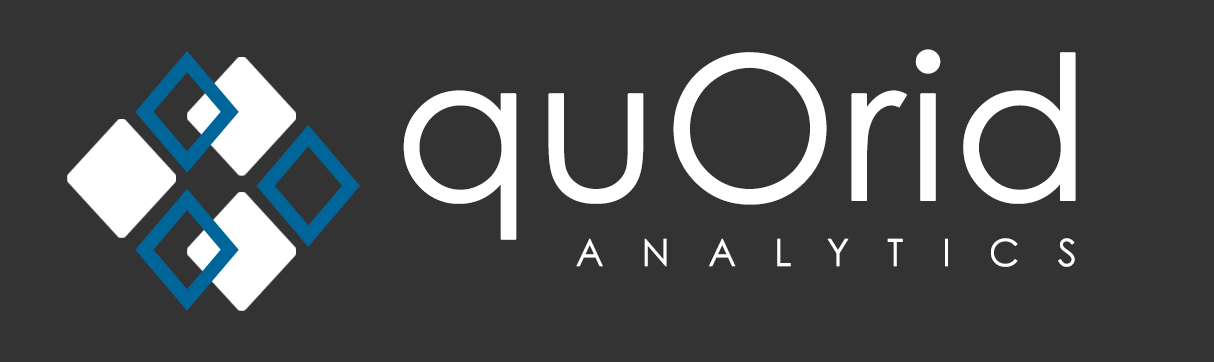
<style>
.page{position:relative;width:1214px;height:362px;background:#333333}
.page>*{position:absolute;margin:0}
.t1{font:200px "CenturyGothic";color:#ffffff;font-weight:bold}
.t2{font:37.5px "CenturyGothic";letter-spacing:1em;color:#ffffff;font-weight:bold}
</style>
<div class="page">
<p class="t1" style="left:403px;top:49px;width:673px;height:191px">quOrid</p>
<p class="t2" style="left:576px;top:238px;width:499px;height:29px">ANALYTICS</p>
</div>
